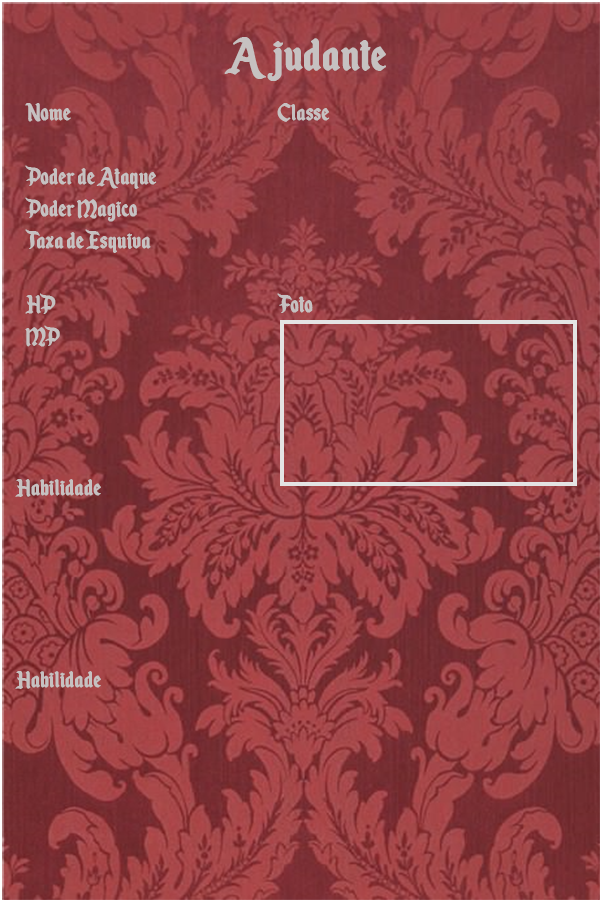
<style>
.page{position:relative;width:600px;height:900px}
.page>*{position:absolute;margin:0}
.t1{font:53.3px "EnchantedLand";color:#c6c1c1;font-weight:bold}
.t2{font:26.7px "EnchantedLand";color:#c6c1c1;font-weight:bold}
</style>
<div class="page">
<p class="t1" style="left:224px;top:37px;width:162px;height:44px">Ajudante</p>
<p class="t2" style="left:25px;top:103px;width:305px;height:244px">Nome      Classe<br><br>Poder de Ataque   <br>Poder Magico   <br>Taxa de Esquiva     <br><br>HP       Foto      <br>MP</p>
<p class="t2" style="left:15px;top:479px;width:86px;height:210px">Habilidade <br><br><br><br><br><br>Habilidade</p>
</div>
